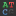
<style>
.page{position:relative;width:16px;height:16px;background:#333333}
.page>*{position:absolute;margin:0}
.t1{font:9px "Courier";color:#56d073}
.t2{font:9px "Courier";color:#f85454}
.t3{font:9px "Courier";color:#5a85b2}
.t4{font:9px "Courier";color:#434343}
</style>
<div class="page">
<p class="t1" style="left:2px;top:2px;width:7px;height:6px">A</p>
<p class="t2" style="left:9px;top:2px;width:5px;height:6px">T</p>
<p class="t3" style="left:2px;top:9px;width:6px;height:6px">C</p>
<p class="t4" style="left:8px;top:9px;width:6px;height:6px">G</p>
</div>
